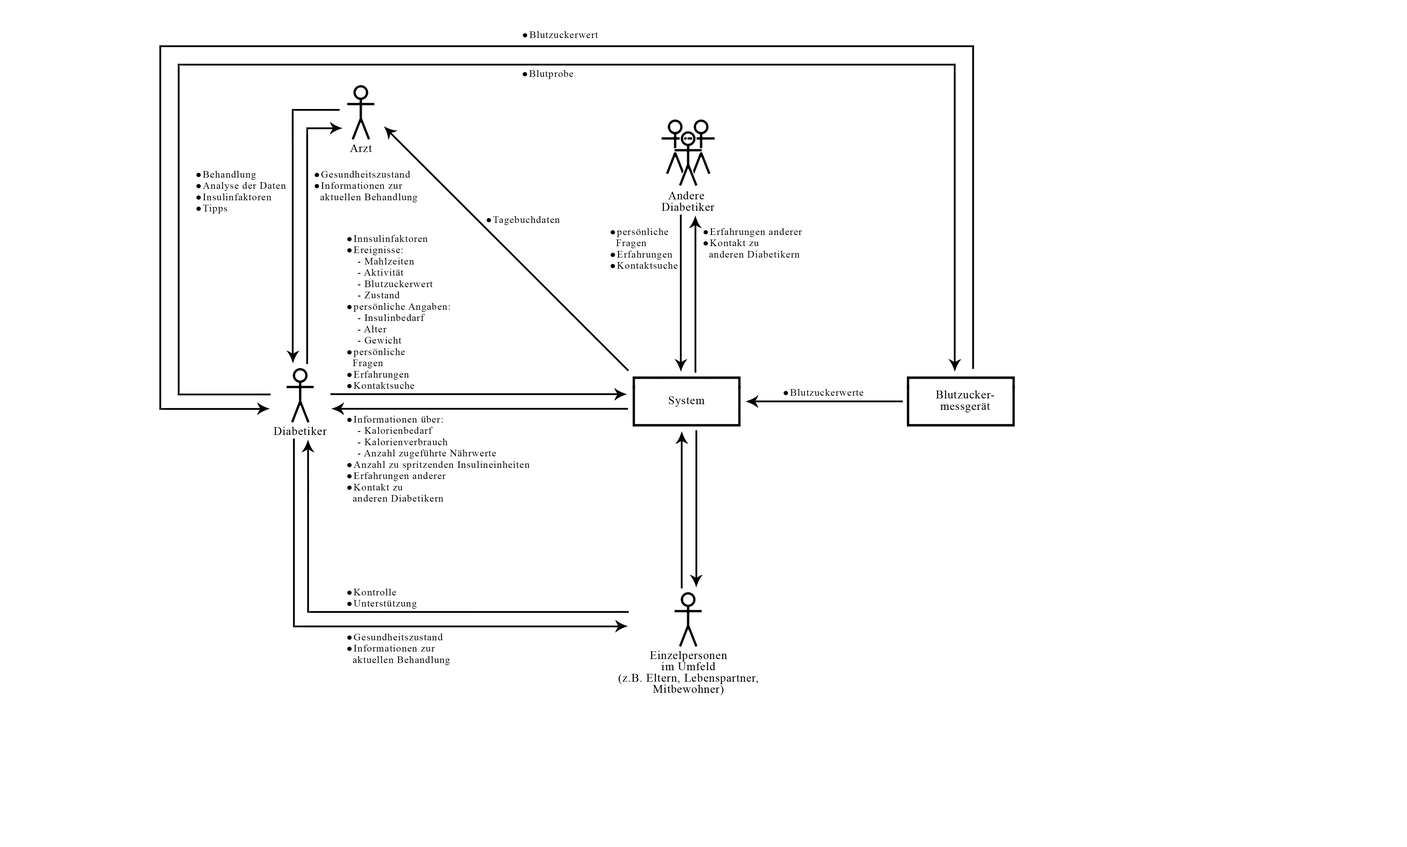
<style>
.page{position:relative;width:1407px;height:847px;background:#ffffff}
.page>*{position:absolute;margin:0}
.t1{font:10.1px "TimesNewRomanPSMT";letter-spacing:0.05em;color:#000000}
.t2{font:7.5px "Wingdings-Regular";letter-spacing:0.2em;color:#000000}
.t3{font:10.1px/11.3px "TimesNewRomanPSMT";letter-spacing:0.05em;color:#000000}
.t4{font:7.5px/11.3px "Wingdings-Regular";letter-spacing:0.2em;color:#000000}
</style>
<div class="page">
<p class="t1" style="left:523px;top:31px;width:75px;height:7px"><span class="t2">l</span>Blutzuckerwert</p>
<p class="t1" style="left:523px;top:70px;width:50px;height:9px"><span class="t2">l</span>Blutprobe</p>
<p class="t3" style="left:196px;top:171px;width:90px;height:43px"><span class="t4">l</span>Behandlung<br><span class="t4">l</span>Analyse der Daten<br><span class="t4">l</span>Insulinfaktoren<br><span class="t4">l</span>Tipps</p>
<p class="t3" style="left:315px;top:171px;width:102px;height:31px"><span class="t4">l</span>Gesundheitszustand <br><span class="t4">l</span>Informationen zur<br>  aktuellen Behandlung</p>
<p class="t1" style="left:487px;top:216px;width:73px;height:9px"><span class="t2">l</span>Tagebuchdaten</p>
<p class="t3" style="left:611px;top:228px;width:67px;height:41px"><span class="t4">l</span>persönliche <br>  Fragen<br><span class="t4">l</span>Erfahrungen <br><span class="t4">l</span>Kontaktsuche</p>
<p class="t3" style="left:704px;top:228px;width:98px;height:30px"><span class="t4">l</span>Erfahrungen anderer <br><span class="t4">l</span>Kontakt zu <br>  anderen Diabetikern</p>
<p class="t3" style="left:347px;top:235px;width:103px;height:154px"><span class="t4">l</span>Innsulinfaktoren<br><span class="t4">l</span>Ereignisse:<br> - Mahlzeiten<br> - Aktivität<br> - Blutzuckerwert<br> - Zustand<br><span class="t4">l</span>persönliche Angaben:<br> - Insulinbedarf<br> - Alter<br> - Gewicht<span class="t4"><br>l</span>persönliche <br>  Fragen<br><span class="t4">l</span>Erfahrungen <br><span class="t4">l</span>Kontaktsuche</p>
<p class="t1" style="left:784px;top:389px;width:80px;height:7px"><span class="t2">l</span>Blutzuckerwerte</p>
<p class="t3" style="left:347px;top:416px;width:183px;height:86px"><span class="t4">l</span>Informationen über:<br> - Kalorienbedarf<br> - Kalorienverbrauch<br> - Anzahl zugeführte Nährwerte<br><span class="t4">l</span>Anzahl zu spritzenden Insulineinheiten <br><span class="t4">l</span>Erfahrungen anderer <br><span class="t4">l</span>Kontakt zu <br>  anderen Diabetikern</p>
<p class="t3" style="left:347px;top:589px;width:70px;height:20px"><span class="t4">l</span>Kontrolle<br><span class="t4">l</span>Unterstützung</p>
<p class="t3" style="left:347px;top:634px;width:103px;height:31px"><span class="t4">l</span>Gesundheitszustand<br><span class="t4">l</span>Informationen zur<br>  aktuellen Behandlung</p>
</div>
